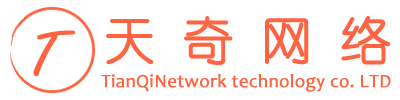
<style>
.page{position:relative;width:400px;height:100px;background:#ffffff}
.page>*{position:absolute;margin:0}
.t1{font:50.7px "YouYuan";color:#fe6441;font-weight:bold}
.t2{font:64.8px "FreestyleScript-Regular";color:#fe6441;font-weight:bold}
.t3{font:18.7px "Candara";color:#fe6441;font-weight:bold}
</style>
<div class="page">
<p class="t1" style="left:106px;top:15px;width:285px;height:50px">天 奇 网 络</p>
<p class="t2" style="left:33px;top:30px;width:42px;height:46px">T</p>
<p class="t3" style="left:101px;top:74px;width:290px;height:18px">TianQiNetwork technology co. LTD</p>
</div>
